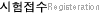
<style>
.page{position:relative;width:100px;height:13px;background:#ffffff}
.page>*{position:absolute;margin:0}
.t1{font:12px "Dotum";color:#000000}
.t2{font:10px "Dotum";color:#acacac;scale:0.87 1}
</style>
<div class="page">
<p class="t1" style="left:0px;top:1px;width:47px;height:12px">시험접수</p>
<p class="t2" style="left:48px;top:3px;width:51px;height:8px">Registeration</p>
</div>
